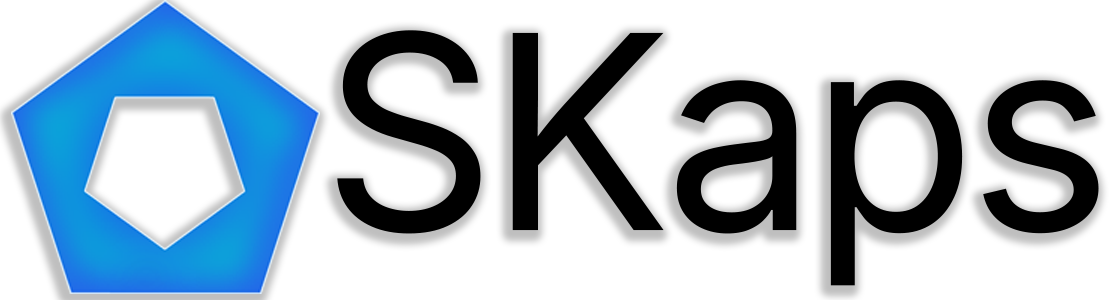
<style>
.page{position:relative;width:1113px;height:300px;background:#ffffff}
.page>*{position:absolute;margin:0}
.t1{font:270.8px "Inter-Regular";letter-spacing:-0.025em;color:#000000}
</style>
<div class="page">
<p class="t1" style="left:337px;top:30px;width:762px;height:256px">SKaps</p>
</div>
